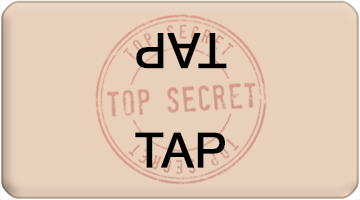
<style>
.page{position:relative;width:360px;height:200px;background:#e8d0bb}
.page>*{position:absolute;margin:0}
.t1{font:48px "ArialMT";color:#000000;font-weight:bold}
</style>
<div class="page">
<p class="t1" style="left:136px;top:33px;width:91px;height:36px;rotate:180deg">TAP</p>
<p class="t1" style="left:135px;top:132px;width:90px;height:36px">TAP</p>
</div>
